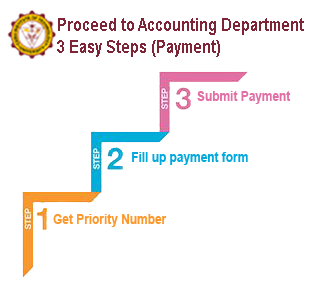
<style>
.page{position:relative;width:311px;height:289px;background:#ffffff}
.page>*{position:absolute;margin:0}
.t1{font:18px "Arial-BoldMT";color:#7e2437;scale:0.85 1}
.t2{font:14px "Arial-BoldMT";color:#e170a6;scale:0.85 1}
.t3{font:14px "Arial-BoldMT";color:#03a9dd;scale:0.85 1}
.t4{font:14px "Arial-BoldMT";color:#fd982c;scale:0.85 1}
</style>
<div class="page">
<p class="t1" style="left:57px;top:18px;width:247px;height:39px">Proceed to Accounting Department<br>3 Easy Steps (Payment)</p>
<p class="t2" style="left:197px;top:91px;width:94px;height:13px">Submit Payment</p>
<p class="t3" style="left:132px;top:152px;width:116px;height:13px">Fill up payment form</p>
<p class="t4" style="left:53px;top:214px;width:114px;height:13px">Get Priority Number</p>
</div>
